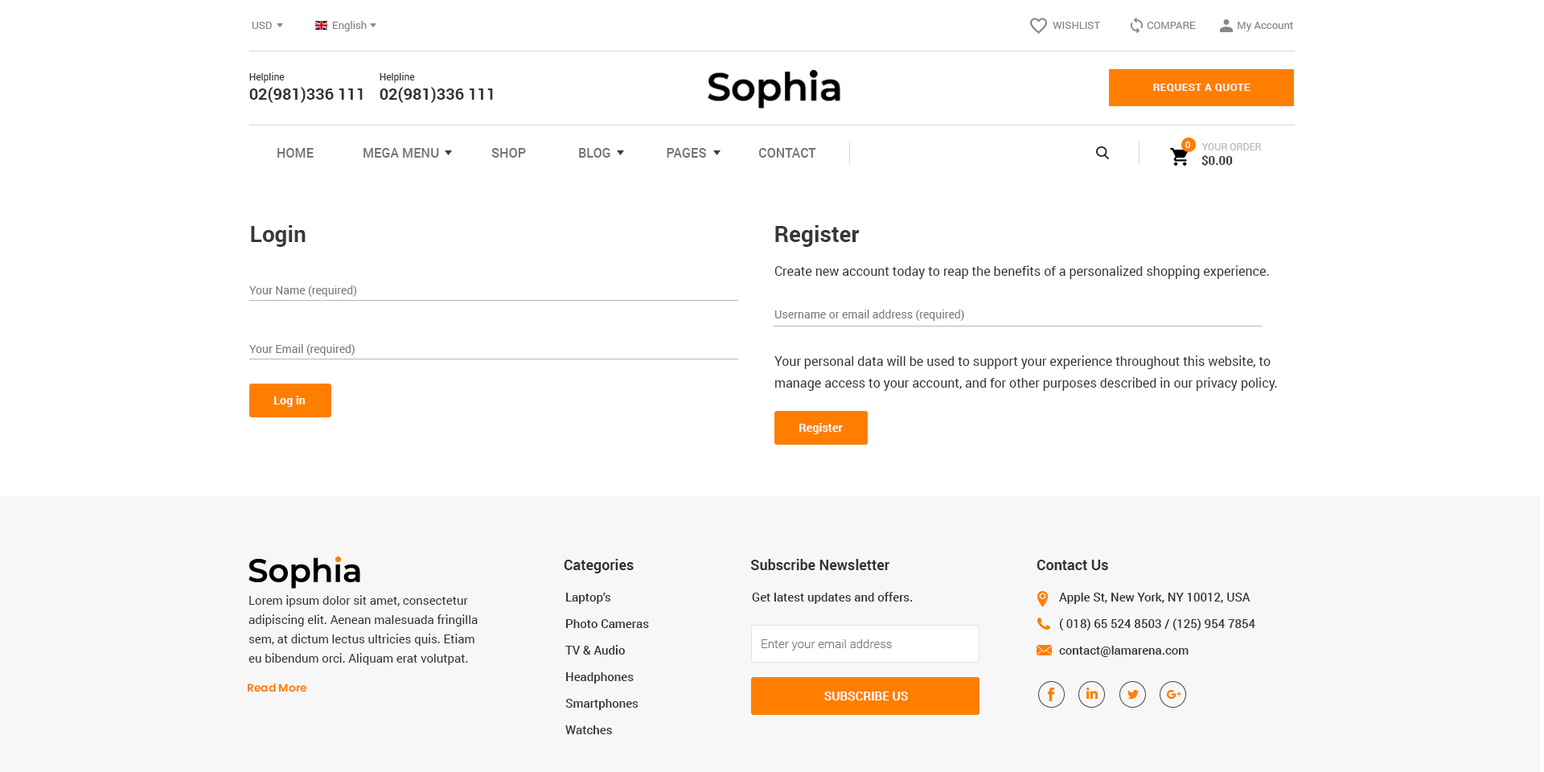
<style>
.page{position:relative;width:1544px;height:772px;background:#ffffff}
.page>*{position:absolute;margin:0}
.t1{font:10.5px "Roboto-Regular";color:#81858c}
.t2{font:16.1px "Roboto-Bold";color:#333333}
.t3{font:9.7px "Roboto-Regular";color:#333333}
.t4{font:10.5px "Roboto-Bold";letter-spacing:0.04em;color:#ffffff}
.t5{font:12.9px "Roboto-Medium";color:#737373}
.t6{font:8.8px "Roboto-Regular";color:#ffffff}
.t7{font:9.7px "Roboto-Regular";color:#b8b7b7}
.t8{font:12.1px "Roboto-Bold";color:#333333}
.t9{font:22.5px "Roboto-Bold";color:#383838}
.t10{font:12.9px "Roboto-Regular";color:#333333}
.t11{font:11.3px "Roboto-Regular";color:#777777}
.t12{font:12.9px/21.7px "Roboto-Regular";color:#333333}
.t13{font:11.3px "Roboto-Bold";color:#ffffff;scale:1.03 1}
.t14{font:14.5px "Roboto-Bold";color:#333333}
.t15{font:12.1px/26.5px "Roboto-Medium";color:#333333}
.t16{font:12.1px "Roboto-Medium";color:#333333}
.t17{font:12.1px/19.3px "Roboto-Regular";color:#333333}
.t18{font:12.1px "Roboto-Light";color:#777777}
.t19{font:10.9px "Poppins-SemiBold";color:#ff7e00}
.t20{font:12.1px "Roboto-Bold";color:#ffffff}
</style>
<div class="page">
<p class="t1" style="left:252px;top:22px;width:20px;height:7px">USD</p>
<p class="t1" style="left:333px;top:21px;width:34px;height:10px">English</p>
<p class="t1" style="left:1053px;top:22px;width:240px;height:9px">WISHLIST                  COMPARE                My Account</p>
<p class="t2" style="left:249px;top:72px;width:114px;height:31px"><span class="t3">Helpline<br></span>02(981)336 111</p>
<p class="t2" style="left:380px;top:72px;width:113px;height:31px"><span class="t3">Helpline<br></span>02(981)336 111</p>
<p class="t4" style="left:1153px;top:84px;width:98px;height:8px">REQUEST A QUOTE</p>
<p class="t5" style="left:277px;top:148px;width:539px;height:10px">HOME               MEGA MENU                SHOP                BLOG                 PAGES                CONTACT</p>
<p class="t6" style="left:1186px;top:142px;width:4px;height:6px">0</p>
<p class="t7" style="left:1202px;top:143px;width:59px;height:7px">YOUR ORDER</p>
<p class="t8" style="left:1202px;top:154px;width:31px;height:12px">$0.00</p>
<p class="t9" style="left:251px;top:225px;width:55px;height:22px">Login</p>
<p class="t9" style="left:775px;top:225px;width:85px;height:22px">Register</p>
<p class="t10" style="left:775px;top:265px;width:494px;height:14px">Create new account today to reap the benefits of a personalized shopping experience.</p>
<p class="t11" style="left:249px;top:286px;width:108px;height:11px">Your Name (required)</p>
<p class="t11" style="left:775px;top:310px;width:189px;height:11px">Username or email address (required)</p>
<p class="t11" style="left:249px;top:344px;width:106px;height:12px">Your Email (required)</p>
<p class="t12" style="left:775px;top:356px;width:502px;height:35px">Your personal data will be used to support your experience throughout this website, to manage access to your account, and for other purposes described in our privacy policy.</p>
<p class="t13" style="left:274px;top:396px;width:31px;height:11px">Log in</p>
<p class="t13" style="left:799px;top:423px;width:44px;height:11px">Register</p>
<p class="t14" style="left:564px;top:559px;width:70px;height:14px">Categories</p>
<p class="t14" style="left:750px;top:559px;width:140px;height:11px">Subscribe Newsletter</p>
<p class="t14" style="left:1037px;top:560px;width:71px;height:10px">Contact Us</p>
<p class="t15" style="left:565px;top:593px;width:84px;height:141px">Laptop’s<br>Photo Cameras<br>TV &amp; Audio<br>Headphones<br>Smartphones<br>Watches</p>
<p class="t16" style="left:752px;top:592px;width:161px;height:12px">Get latest updates and offers.</p>
<p class="t15" style="left:1059px;top:593px;width:197px;height:64px">Apple St, New York, NY 10012, USA<br>( 018) 65 524 8503 / (125) 954 7854<br>contact@lamarena.com</p>
<p class="t17" style="left:249px;top:595px;width:229px;height:70px">Lorem ipsum dolor sit amet, consectetur adipiscing elit. Aenean malesuada fringilla sem, at dictum lectus ultricies quis. Etiam eu bibendum orci. Aliquam erat volutpat.</p>
<p class="t18" style="left:762px;top:639px;width:130px;height:12px">Enter your email address</p>
<p class="t19" style="left:247px;top:683px;width:60px;height:10px">Read More</p>
<p class="t20" style="left:824px;top:692px;width:84px;height:9px">SUBSCRIBE US</p>
</div>
